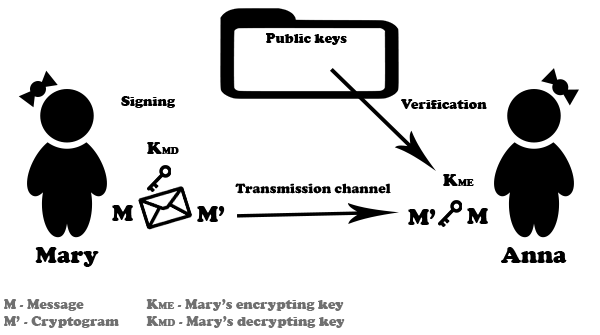
<style>
.page{position:relative;width:600px;height:335px;background:#ffffff}
.page>*{position:absolute;margin:0}
.t1{font:14px "CooperBlack";color:#000000}
.t2{font:10px "CooperBlack";color:#000000}
.t3{font:18px "CooperBlack";color:#000000}
.t4{font:24px "CooperBlack";color:#000000}
.t5{font:14px "CooperBlack";color:#707070}
.t6{font:10px "CooperBlack";color:#707070}
</style>
<div class="page">
<p class="t1" style="left:266px;top:33px;width:81px;height:12px">Public keys</p>
<p class="t1" style="left:121px;top:96px;width:54px;height:12px">Signing</p>
<p class="t1" style="left:401px;top:99px;width:86px;height:10px">Verification</p>
<p class="t2" style="left:147px;top:142px;width:32px;height:12px"><span class="t3">K</span>MD</p>
<p class="t2" style="left:443px;top:174px;width:31px;height:12px"><span class="t3">K</span>ME</p>
<p class="t1" style="left:235px;top:183px;width:156px;height:11px">Transmission channel</p>
<p class="t4" style="left:112px;top:205px;width:21px;height:16px">M</p>
<p class="t4" style="left:197px;top:206px;width:28px;height:16px">M’</p>
<p class="t4" style="left:408px;top:209px;width:28px;height:16px">M’</p>
<p class="t4" style="left:467px;top:208px;width:21px;height:16px">M</p>
<p class="t4" style="left:35px;top:247px;width:64px;height:20px">Mary</p>
<p class="t4" style="left:501px;top:247px;width:66px;height:16px">Anna</p>
<p class="t5" style="left:4px;top:299px;width:115px;height:29px">M - Message<br>M’ - Cryptogram</p>
<p class="t5" style="left:146px;top:299px;width:199px;height:29px">K<span class="t6">ME</span> - Mary’s encrypting key<br>K<span class="t6">MD</span> - Mary’s decrypting key</p>
</div>
